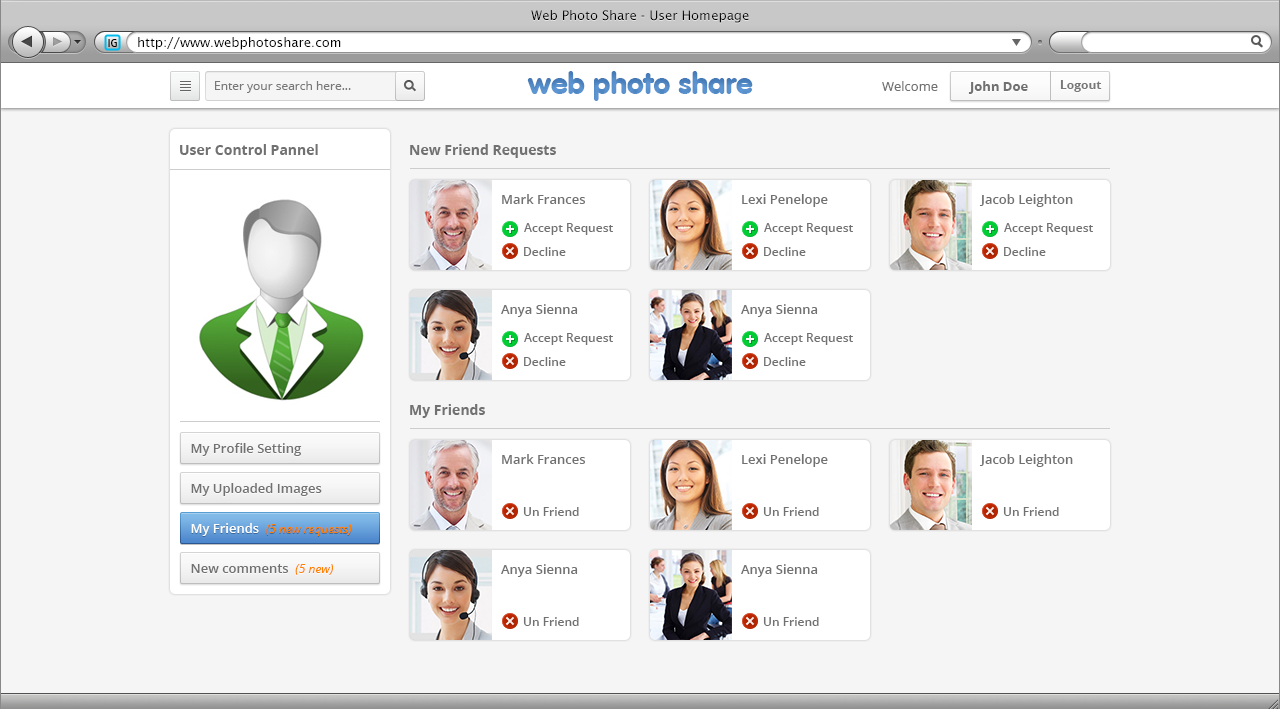
<style>
.page{position:relative;width:1280px;height:709px;background:#f5f5f5}
.page>*{position:absolute;margin:0}
.t1{font:13px "LucidaSans";color:#000000}
.t2{font:12px "Dax-Regular";color:#000000}
.t3{font:30px "VAGRounded-Black";color:#619bd7}
.t4{font:12px "OpenSans";color:#787878}
.t5{font:13px "OpenSans";color:#717171}
.t6{font:13px "OpenSans-Bold";color:#717171}
.t7{font:12px "OpenSans-Bold";color:#787878}
.t8{font:14px "OpenSans-Bold";color:#717171}
.t9{font:13px "OpenSans-Semibold";color:#717171}
.t10{font:12px "OpenSans-Semibold";color:#717171}
.t11{font:12px "OpenSans-Italic";color:#ff8100}
.t12{font:13px "OpenSans-Semibold";color:#ffffff}
</style>
<div class="page">
<p class="t1" style="left:531px;top:10px;width:218px;height:13px">Web Photo Share - User Homepage</p>
<p class="t2" style="left:108px;top:39px;width:9px;height:8px">IG</p>
<p class="t1" style="left:138px;top:37px;width:203px;height:13px">http://www.webphotoshare.com</p>
<p class="t3" style="left:527px;top:71px;width:226px;height:30px">web photo share</p>
<p class="t4" style="left:215px;top:81px;width:136px;height:12px">Enter your search here...</p>
<p class="t5" style="left:882px;top:81px;width:56px;height:10px">Welcome</p>
<p class="t6" style="left:968px;top:81px;width:60px;height:13px">John Doe</p>
<p class="t7" style="left:1060px;top:80px;width:42px;height:12px">Logout</p>
<p class="t8" style="left:180px;top:144px;width:138px;height:11px">User Control Pannel</p>
<p class="t8" style="left:410px;top:144px;width:146px;height:14px">New Friend Requests</p>
<p class="t9" style="left:502px;top:194px;width:83px;height:10px">Mark Frances</p>
<p class="t9" style="left:742px;top:194px;width:86px;height:13px">Lexi Penelope</p>
<p class="t9" style="left:979px;top:194px;width:94px;height:13px">Jacob Leighton</p>
<p class="t10" style="left:524px;top:223px;width:89px;height:12px">Accept Request</p>
<p class="t10" style="left:764px;top:223px;width:89px;height:12px">Accept Request</p>
<p class="t10" style="left:1004px;top:223px;width:89px;height:12px">Accept Request</p>
<p class="t10" style="left:524px;top:247px;width:42px;height:9px">Decline</p>
<p class="t10" style="left:764px;top:247px;width:42px;height:9px">Decline</p>
<p class="t10" style="left:1004px;top:247px;width:42px;height:9px">Decline</p>
<p class="t9" style="left:501px;top:304px;width:77px;height:13px">Anya Sienna</p>
<p class="t9" style="left:741px;top:304px;width:77px;height:13px">Anya Sienna</p>
<p class="t10" style="left:524px;top:333px;width:89px;height:12px">Accept Request</p>
<p class="t10" style="left:764px;top:333px;width:89px;height:12px">Accept Request</p>
<p class="t10" style="left:524px;top:357px;width:42px;height:9px">Decline</p>
<p class="t10" style="left:764px;top:357px;width:42px;height:9px">Decline</p>
<p class="t8" style="left:410px;top:404px;width:75px;height:14px">My Friends</p>
<p class="t9" style="left:191px;top:443px;width:111px;height:13px">My Profile Setting</p>
<p class="t9" style="left:502px;top:454px;width:83px;height:10px">Mark Frances</p>
<p class="t9" style="left:742px;top:454px;width:86px;height:13px">Lexi Penelope</p>
<p class="t9" style="left:979px;top:454px;width:94px;height:13px">Jacob Leighton</p>
<p class="t9" style="left:191px;top:483px;width:131px;height:13px">My Uploaded Images</p>
<p class="t10" style="left:523px;top:507px;width:56px;height:9px">Un Friend</p>
<p class="t10" style="left:763px;top:507px;width:56px;height:9px">Un Friend</p>
<p class="t10" style="left:1003px;top:507px;width:56px;height:9px">Un Friend</p>
<p class="t11" style="left:191px;top:523px;width:161px;height:13px"><span class="t12">My Friends  </span>(5 new requests)</p>
<p class="t9" style="left:191px;top:564px;width:142px;height:11px">New comments  <span class="t11">(5 new)</span></p>
<p class="t9" style="left:501px;top:564px;width:77px;height:13px">Anya Sienna</p>
<p class="t9" style="left:741px;top:564px;width:77px;height:13px">Anya Sienna</p>
<p class="t10" style="left:523px;top:617px;width:56px;height:9px">Un Friend</p>
<p class="t10" style="left:763px;top:617px;width:56px;height:9px">Un Friend</p>
</div>
